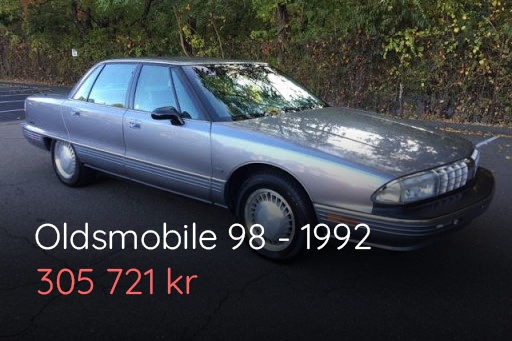
<style>
.page{position:relative;width:512px;height:341px}
.page>*{position:absolute;margin:0}
.t1{font:35.6px "Quicksand-Regular";color:#ffffff}
.t2{font:35.6px "Quicksand-Regular";color:#ff6666}
</style>
<div class="page">
<p class="t1" style="left:35px;top:222px;width:336px;height:28px">Oldsmobile 98 - 1992</p>
<p class="t2" style="left:37px;top:267px;width:161px;height:28px">305 721 kr</p>
</div>
